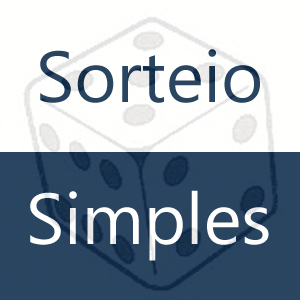
<style>
.page{position:relative;width:300px;height:300px;background:#fffffd}
.page>*{position:absolute;margin:0}
.t1{font:72px "NirmalaUI";color:#2a4560}
.t2{font:72px "NirmalaUI";color:#ffffff}
</style>
<div class="page">
<p class="t1" style="left:40px;top:49px;width:220px;height:54px">Sorteio</p>
<p class="t2" style="left:30px;top:190px;width:239px;height:71px">Simples</p>
</div>
